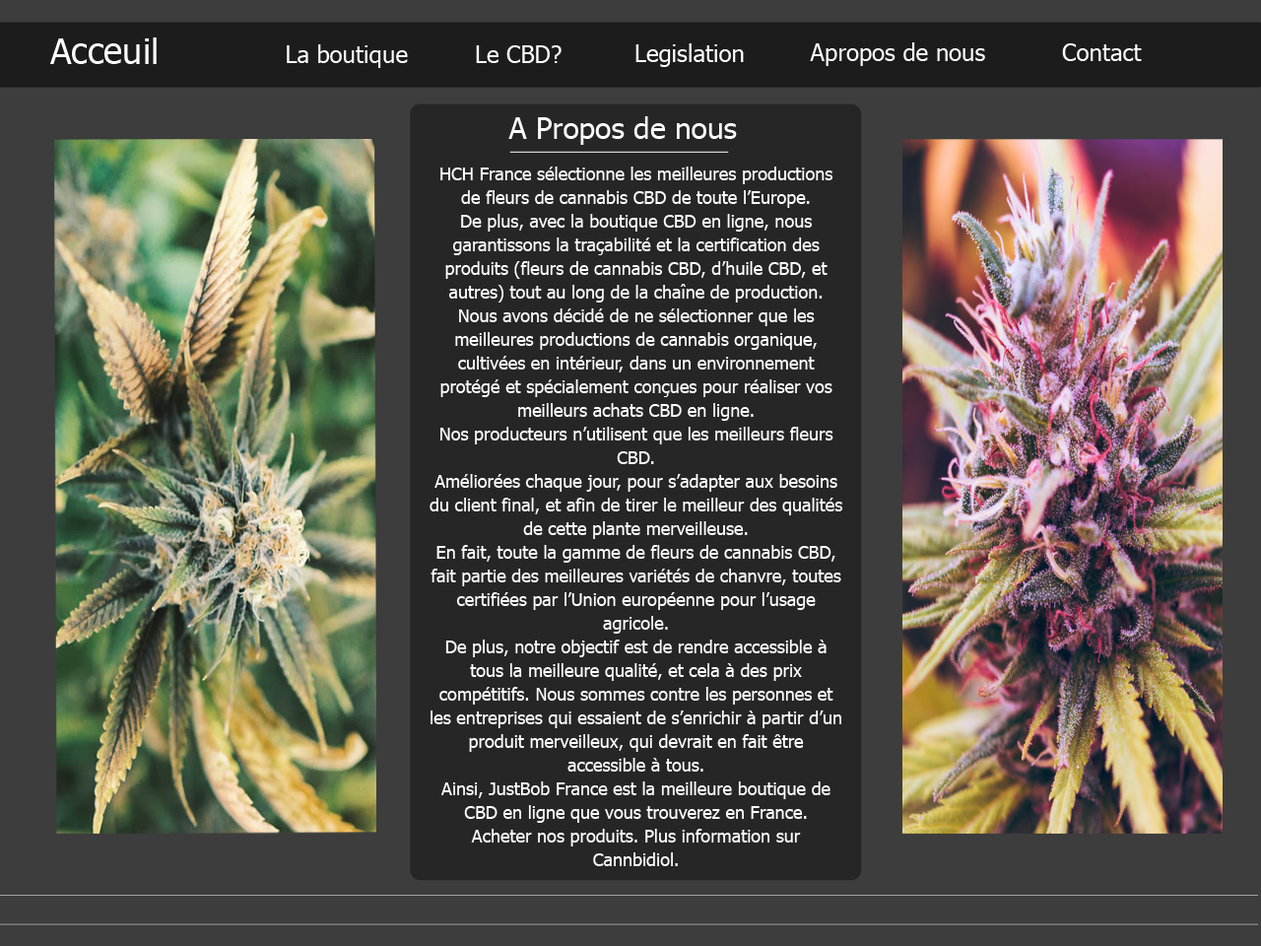
<style>
.page{position:relative;width:1261px;height:946px;background:#3d3d3d}
.page>*{position:absolute;margin:0}
.t1{font:35.5px "Tahoma";color:#ffffff}
.t2{font:23.6px "Tahoma";color:#ffffff}
.t3{font:29.6px "Tahoma";color:#ffffff}
.t4{font:17.7px/23.6px "Tahoma";color:#ffffff}
</style>
<div class="page">
<p class="t1" style="left:50px;top:37px;width:107px;height:27px">Acceuil</p>
<p class="t2" style="left:287px;top:44px;width:121px;height:24px">La boutique</p>
<p class="t2" style="left:476px;top:45px;width:86px;height:18px">Le CBD?</p>
<p class="t2" style="left:635px;top:43px;width:109px;height:24px">Legislation</p>
<p class="t2" style="left:810px;top:42px;width:175px;height:24px">Apropos de nous</p>
<p class="t2" style="left:1062px;top:43px;width:80px;height:18px">Contact</p>
<p class="t3" style="left:508px;top:116px;width:229px;height:29px">A Propos de nous</p>
<p class="t4" style="left:429px;top:166px;width:413px;height:700px;text-align:center">HCH France sélectionne les meilleures productions de fleurs de cannabis CBD de toute l’Europe.<br>De plus, avec la boutique CBD en ligne, nous garantissons la traçabilité et la certification des produits (fleurs de cannabis CBD, d’huile CBD, et autres) tout au long de la chaîne de production.<br>Nous avons décidé de ne sélectionner que les meilleures productions de cannabis organique, cultivées en intérieur, dans un environnement protégé et spécialement conçues pour réaliser vos meilleurs achats CBD en ligne.<br>Nos producteurs n’utilisent que les meilleurs fleurs CBD.<br>Améliorées chaque jour, pour s’adapter aux besoins du client final, et afin de tirer le meilleur des qualités de cette plante merveilleuse.<br>En fait, toute la gamme de fleurs de cannabis CBD, fait partie des meilleures variétés de chanvre, toutes certifiées par l’Union européenne pour l’usage agricole.<br>De plus, notre objectif est de rendre accessible à tous la meilleure qualité, et cela à des prix compétitifs. Nous sommes contre les personnes et les entreprises qui essaient de s’enrichir à partir d’un produit merveilleux, qui devrait en fait être accessible à tous.<br>Ainsi, JustBob France est la meilleure boutique de CBD en ligne que vous trouverez en France.<br>Acheter nos produits. Plus information sur Cannbidiol.</p>
</div>
